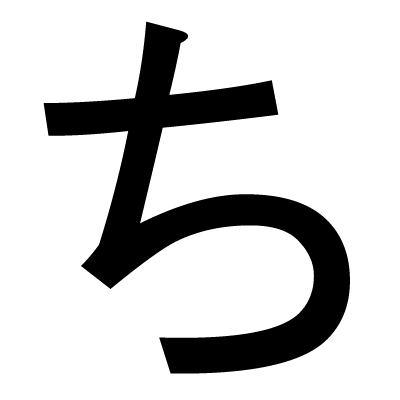
<style>
.page{position:relative;width:400px;height:400px;background:#ffffff}
.page>*{position:absolute;margin:0}
.t1{font:416.7px "MS-PGothic";color:#000000}
</style>
<div class="page">
<p class="t1" style="left:43px;top:21px;width:307px;height:353px">ち</p>
</div>
